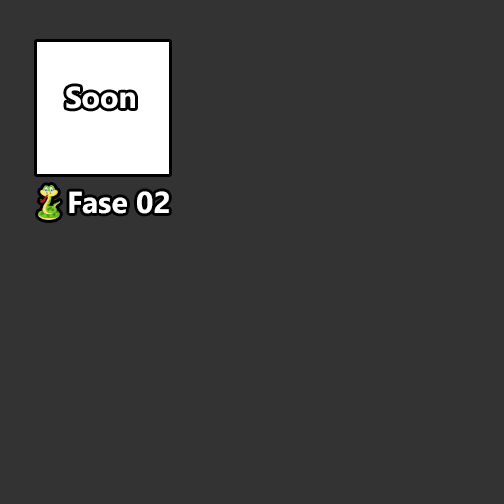
<style>
.page{position:relative;width:504px;height:504px;background:#333333}
.page>*{position:absolute;margin:0}
.t1{font:30.2px "SegoeUI-Bold";color:#ffffff}
</style>
<div class="page">
<p class="t1" style="left:66px;top:86px;width:69px;height:23px">Soon</p>
<p class="t1" style="left:69px;top:191px;width:100px;height:23px">Fase 02</p>
</div>
